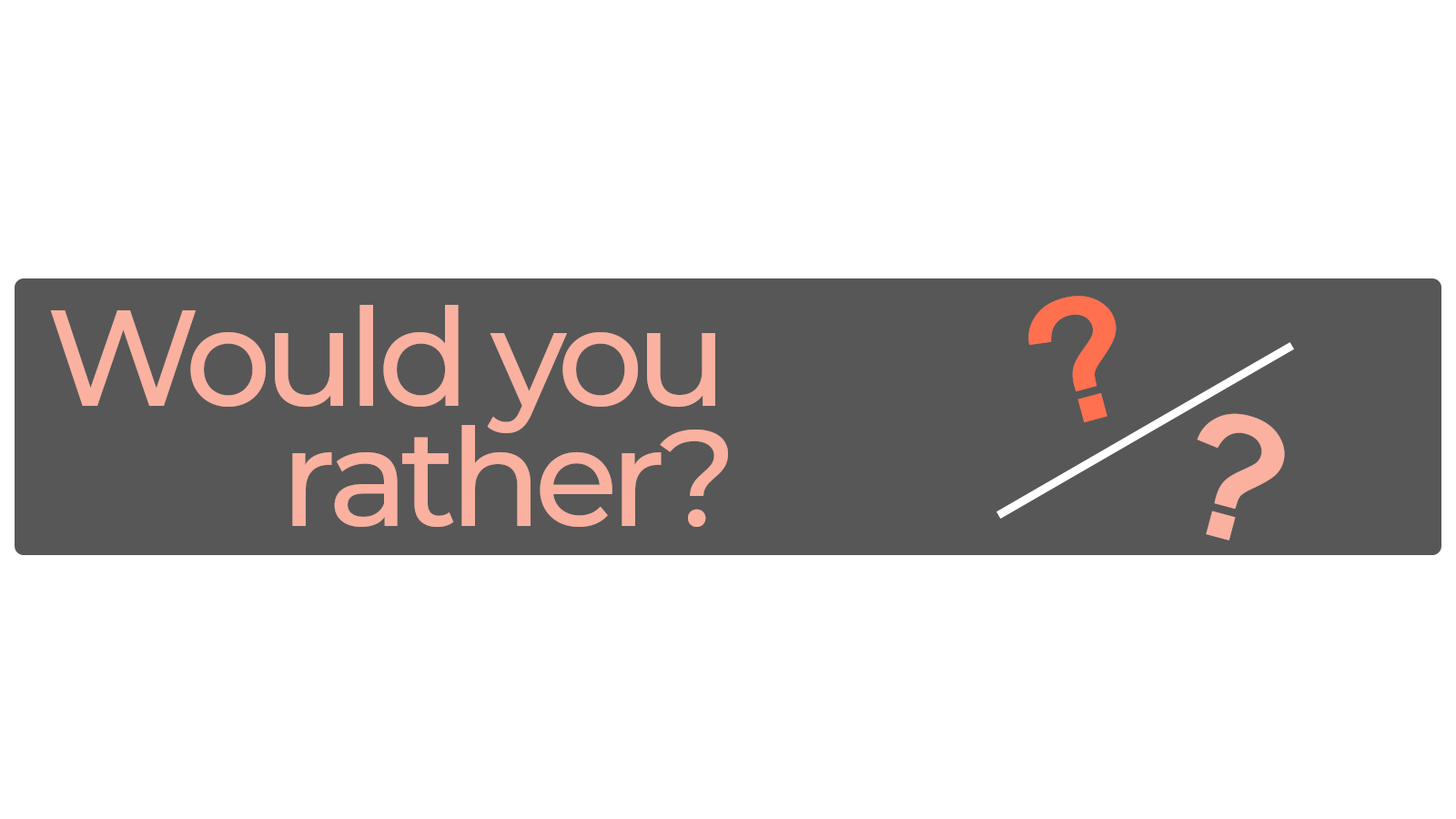
<style>
.page{position:relative;width:1456px;height:819px;background:#ffffff}
.page>*{position:absolute;margin:0}
.t1{font:136.5px "Montserrat-Medium";letter-spacing:-0.06em;color:#fab1a0}
.t2{font:173.3px "Arial-BoldMT";letter-spacing:-0.04em;color:#ff704f}
.t3{font:173.3px "Arial-BoldMT";letter-spacing:-0.04em;color:#fab1a0}
</style>
<div class="page">
<p class="t1" style="left:50px;top:305px;width:665px;height:128px">Would you</p>
<p class="t2" style="left:1028px;top:296px;width:89px;height:127px;rotate:-15deg">?</p>
<p class="t3" style="left:1197px;top:413px;width:88px;height:128px;rotate:15deg">?</p>
<p class="t1" style="left:292px;top:425px;width:436px;height:103px">rather?</p>
</div>
